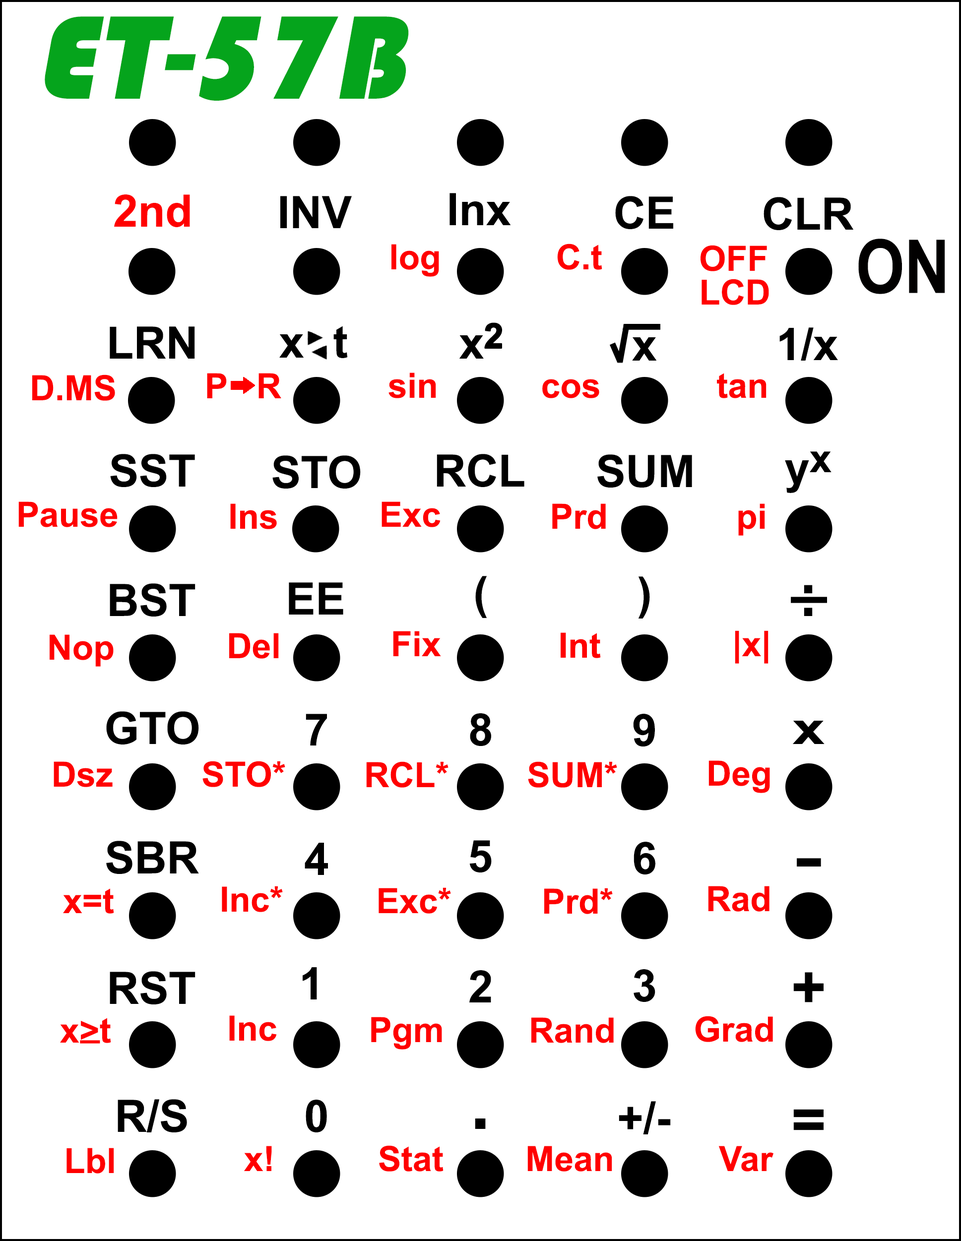
<style>
.page{position:relative;width:961px;height:1241px;background:#ffffff}
.page>*{position:absolute;margin:0}
.t1{font:123.1px "Bauhaus93";color:#05a41c;font-style:italic}
.t2{font:44.6px "Arial-BoldMT";color:#ff0000}
.t3{font:44.6px "Arial-BoldMT";color:#000000}
.t4{font:34.7px "Arial-BoldMT";color:#ff0000}
.t5{font:74.3px "Arial-BoldMT";color:#010000;scale:0.84 1}
.t6{font:34.7px "Arial-BoldMT";color:#000000;font-weight:bold}
.t7{font:39.7px "Arial-BoldMT";color:#000000}
.t8{font:59.5px "Arial-BoldMT";color:#000000}
.t9{font:44.6px "Arial-BoldMT";letter-spacing:0.1em;color:#000000;scale:3 1}
.t10{font:44.6px "Arial-BoldMT";letter-spacing:0.1em;color:#000000;scale:1.3 1}
.t11{font:59.5px "Arial-BoldMT";letter-spacing:0.1em;color:#000000;scale:1.5 1}
.t12{font:59.5px "Arial-BoldMT";letter-spacing:0.1em;color:#000000}
.t13{font:74.4px "Arial-BoldMT";color:#000000}
</style>
<div class="page">
<p class="t1" style="left:45px;top:16px;width:364px;height:85px">ET-57B</p>
<p class="t2" style="left:114px;top:194px;width:76px;height:33px">2nd</p>
<p class="t3" style="left:280px;top:196px;width:72px;height:32px">INV</p>
<p class="t3" style="left:449px;top:193px;width:62px;height:32px">lnx</p>
<p class="t3" style="left:615px;top:196px;width:58px;height:33px">CE</p>
<p class="t3" style="left:763px;top:197px;width:90px;height:33px">CLR</p>
<p class="t4" style="left:391px;top:244px;width:48px;height:33px">log</p>
<p class="t4" style="left:557px;top:244px;width:45px;height:26px">C.t</p>
<p class="t4" style="left:700px;top:245px;width:67px;height:26px">OFF</p>
<p class="t5" style="left:858px;top:239px;width:87px;height:55px">ON</p>
<p class="t4" style="left:701px;top:279px;width:68px;height:26px">LCD</p>
<p class="t3" style="left:110px;top:326px;width:85px;height:33px">LRN</p>
<p class="t3" style="left:279px;top:326px;width:69px;height:32px">x   t</p>
<p class="t3" style="left:459px;top:322px;width:43px;height:37px">x<span class="t6">2</span></p>
<p class="t3" style="left:779px;top:327px;width:59px;height:34px">1/x</p>
<p class="t3" style="left:632px;top:337px;width:25px;height:24px">x</p>
<p class="t4" style="left:32px;top:375px;width:83px;height:26px">D.MS</p>
<p class="t4" style="left:207px;top:373px;width:74px;height:25px">P   R</p>
<p class="t4" style="left:388px;top:373px;width:48px;height:25px">sin</p>
<p class="t4" style="left:717px;top:373px;width:49px;height:25px">tan</p>
<p class="t4" style="left:542px;top:379px;width:57px;height:19px">cos</p>
<p class="t3" style="left:110px;top:454px;width:85px;height:33px">SST</p>
<p class="t3" style="left:272px;top:455px;width:89px;height:34px">STO</p>
<p class="t3" style="left:437px;top:454px;width:87px;height:33px">RCL</p>
<p class="t3" style="left:597px;top:454px;width:95px;height:34px">SUM</p>
<p class="t3" style="left:785px;top:451px;width:46px;height:42px">y<span class="t7">x</span></p>
<p class="t4" style="left:18px;top:501px;width:100px;height:26px">Pause</p>
<p class="t4" style="left:230px;top:503px;width:47px;height:26px">Ins</p>
<p class="t4" style="left:381px;top:501px;width:59px;height:26px">Exc</p>
<p class="t4" style="left:552px;top:503px;width:54px;height:26px">Prd</p>
<p class="t4" style="left:738px;top:503px;width:27px;height:33px">pi</p>
<p class="t3" style="left:475px;top:576px;width:12px;height:42px">(</p>
<p class="t3" style="left:638px;top:576px;width:12px;height:43px">)</p>
<p class="t3" style="left:110px;top:583px;width:85px;height:34px">BST</p>
<p class="t3" style="left:289px;top:582px;width:54px;height:33px">EE</p>
<p class="t8" style="left:804px;top:585px;width:8px;height:31px">:</p>
<p class="t9" style="left:791px;top:597px;width:36px;height:6px">-</p>
<p class="t4" style="left:50px;top:634px;width:64px;height:33px">Nop</p>
<p class="t4" style="left:229px;top:633px;width:50px;height:26px">Del</p>
<p class="t4" style="left:393px;top:631px;width:48px;height:25px">Fix</p>
<p class="t4" style="left:561px;top:632px;width:40px;height:26px">Int</p>
<p class="t4" style="left:735px;top:630px;width:33px;height:34px">|x|</p>
<p class="t3" style="left:106px;top:711px;width:93px;height:34px">GTO</p>
<p class="t3" style="left:306px;top:714px;width:21px;height:32px">7</p>
<p class="t3" style="left:470px;top:713px;width:21px;height:33px">8</p>
<p class="t3" style="left:633px;top:714px;width:22px;height:33px">9</p>
<p class="t10" style="left:793px;top:721px;width:31px;height:23px">x</p>
<p class="t4" style="left:54px;top:761px;width:59px;height:26px">Dsz</p>
<p class="t4" style="left:202px;top:761px;width:83px;height:26px">STO*</p>
<p class="t4" style="left:366px;top:761px;width:82px;height:27px">RCL*</p>
<p class="t4" style="left:528px;top:761px;width:89px;height:27px">SUM*</p>
<p class="t4" style="left:708px;top:760px;width:62px;height:33px">Deg</p>
<p class="t3" style="left:106px;top:841px;width:93px;height:33px">SBR</p>
<p class="t3" style="left:305px;top:843px;width:23px;height:32px">4</p>
<p class="t3" style="left:469px;top:840px;width:23px;height:33px">5</p>
<p class="t3" style="left:633px;top:842px;width:22px;height:33px">6</p>
<p class="t11" style="left:797px;top:858px;width:24px;height:9px">-</p>
<p class="t4" style="left:63px;top:888px;width:51px;height:26px">x=t</p>
<p class="t4" style="left:222px;top:886px;width:61px;height:26px">Inc*</p>
<p class="t4" style="left:378px;top:887px;width:73px;height:27px">Exc*</p>
<p class="t4" style="left:544px;top:888px;width:69px;height:26px">Prd*</p>
<p class="t4" style="left:708px;top:886px;width:61px;height:26px">Rad</p>
<p class="t3" style="left:110px;top:971px;width:85px;height:33px">RST</p>
<p class="t3" style="left:303px;top:967px;width:14px;height:33px">1</p>
<p class="t3" style="left:469px;top:970px;width:22px;height:32px">2</p>
<p class="t3" style="left:633px;top:969px;width:22px;height:33px">3</p>
<p class="t12" style="left:793px;top:972px;width:30px;height:30px">+</p>
<p class="t4" style="left:60px;top:1018px;width:51px;height:25px">x&gt;t</p>
<p class="t4" style="left:229px;top:1015px;width:48px;height:26px">Inc</p>
<p class="t4" style="left:371px;top:1017px;width:71px;height:33px">Pgm</p>
<p class="t4" style="left:531px;top:1017px;width:83px;height:26px">Rand</p>
<p class="t4" style="left:695px;top:1016px;width:78px;height:26px">Grad</p>
<p class="t4" style="left:80px;top:1040px;width:20px;height:4px">_</p>
<p class="t3" style="left:118px;top:1099px;width:69px;height:33px">R/S</p>
<p class="t3" style="left:306px;top:1100px;width:21px;height:32px">0</p>
<p class="t3" style="left:619px;top:1101px;width:52px;height:33px">+/-</p>
<p class="t12" style="left:793px;top:1109px;width:30px;height:21px">=</p>
<p class="t13" style="left:475px;top:1119px;width:11px;height:10px">.</p>
<p class="t4" style="left:244px;top:1146px;width:28px;height:25px">x!</p>
<p class="t4" style="left:379px;top:1145px;width:64px;height:27px">Stat</p>
<p class="t4" style="left:527px;top:1146px;width:85px;height:26px">Mean</p>
<p class="t4" style="left:718px;top:1146px;width:55px;height:26px">Var</p>
<p class="t4" style="left:66px;top:1148px;width:48px;height:26px">Lbl</p>
</div>
